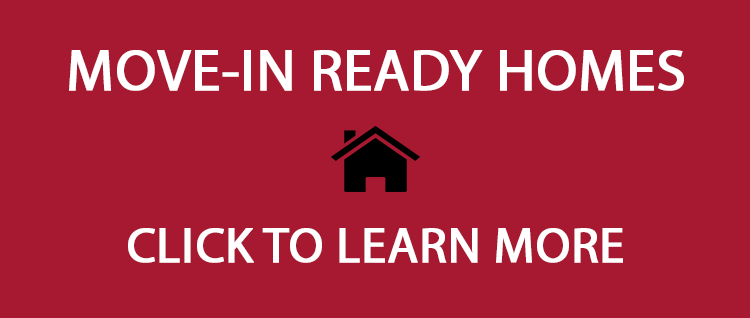
<style>
.page{position:relative;width:750px;height:318px;background:#a71931}
.page>*{position:absolute;margin:0}
.t1{font:58.3px "MyriadPro-Regular";color:#ffffff;font-weight:bold}
.t2{font:50px "MyriadPro-Regular";color:#ffffff;font-weight:bold}
</style>
<div class="page">
<p class="t1" style="left:69px;top:50px;width:615px;height:41px">MOVE-IN READY HOMES</p>
<p class="t2" style="left:128px;top:228px;width:495px;height:35px">CLICK TO LEARN MORE</p>
</div>
